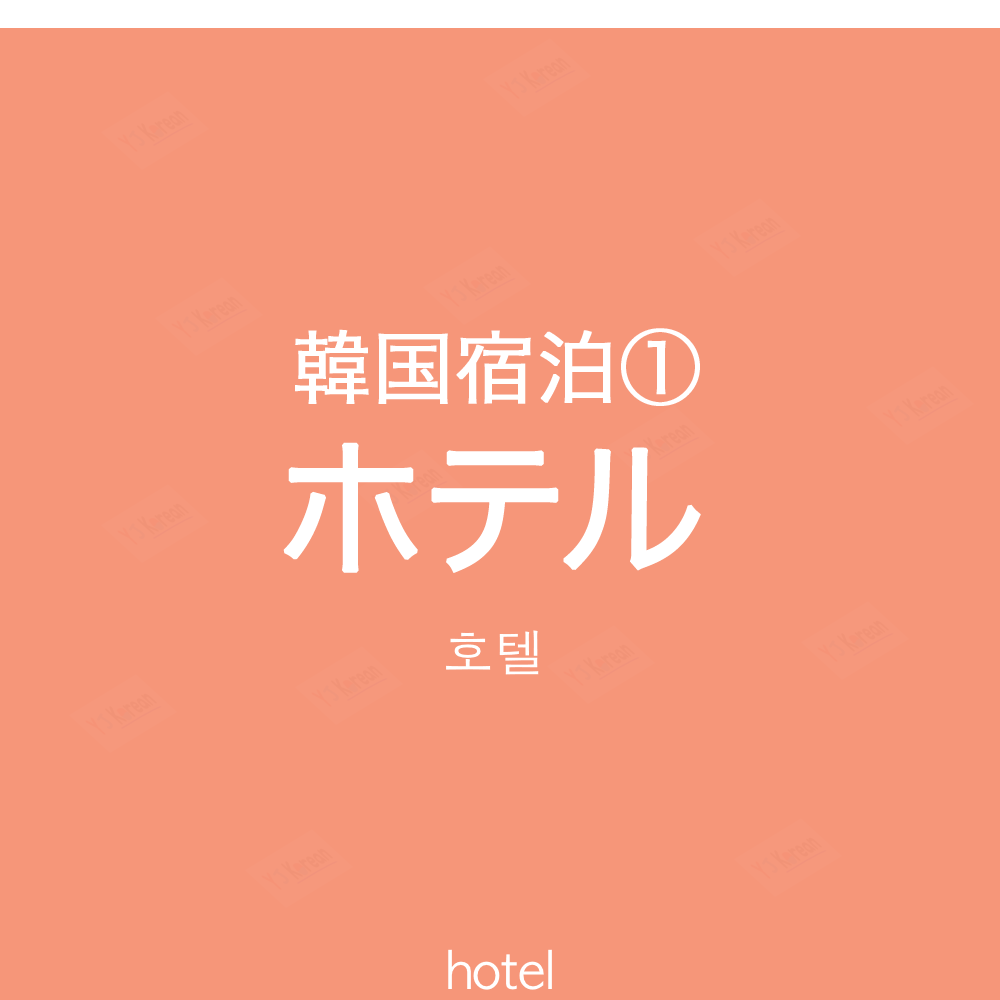
<style>
.page{position:relative;width:1000px;height:1000px;background:#f69679}
.page>*{position:absolute;margin:0}
.t1{font:80px "HiraKakuProN-W3";color:#ffffff;font-weight:bold}
.t2{font:150px "HiraKakuProN-W3";color:#ffffff;font-weight:bold}
.t3{font:50px "AppleGothic";color:#ffffff}
</style>
<div class="page">
<p class="t1" style="left:295px;top:328px;width:405px;height:78px">韓国宿泊①</p>
<p class="t2" style="left:283px;top:442px;width:418px;height:131px">ホテル</p>
<p class="t3" style="left:446px;top:630px;width:93px;height:45px">호텔</p>
<p class="t3" style="left:448px;top:949px;width:104px;height:41px">hotel</p>
</div>
